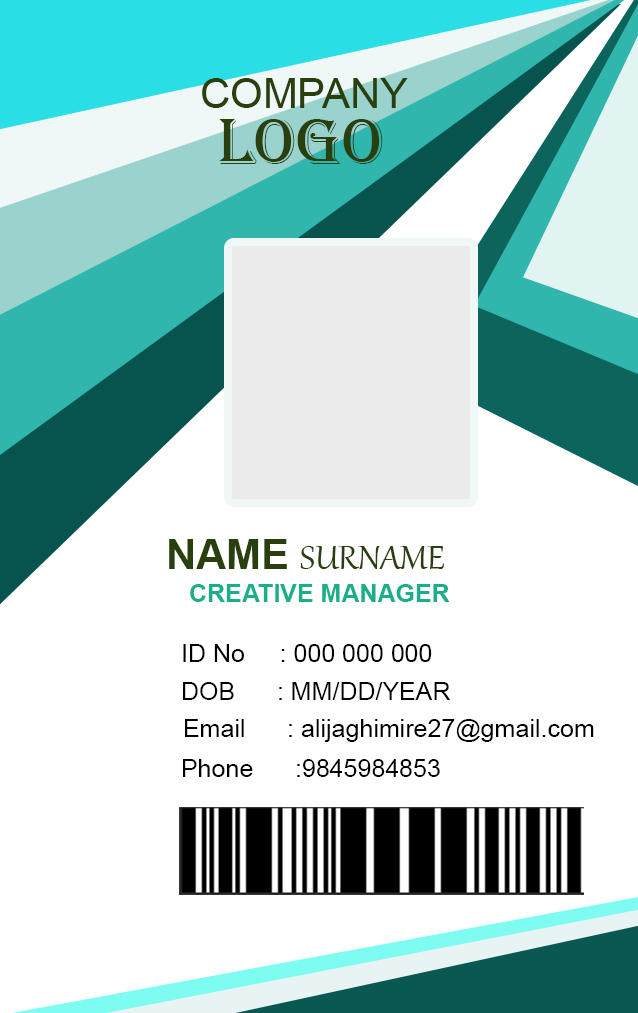
<style>
.page{position:relative;width:638px;height:1013px;background:#ffffff}
.page>*{position:absolute;margin:0}
.t1{font:41.7px "ArialMT";color:#29400e}
.t2{font:66.7px "Algerian";color:#29400e}
.t3{font:41.7px "Gabriola";color:#29400e}
.t4{font:41.7px "Arial-BoldMT";color:#29400e}
.t5{font:25px "Arial-BoldMT";color:#18af8a}
.t6{font:25px "ArialMT";color:#000000}
</style>
<div class="page">
<p class="t1" style="left:202px;top:78px;width:206px;height:30px">COMPANY</p>
<p class="t2" style="left:219px;top:119px;width:164px;height:45px">LOGO</p>
<p class="t3" style="left:169px;top:539px;width:275px;height:30px"><span class="t4">NAME </span>SURNAME</p>
<p class="t5" style="left:190px;top:584px;width:260px;height:18px">CREATIVE MANAGER</p>
<p class="t6" style="left:183px;top:644px;width:249px;height:18px">ID No     : 000 000 000</p>
<p class="t6" style="left:183px;top:682px;width:267px;height:18px">DOB      : MM/DD/YEAR</p>
<p class="t6" style="left:185px;top:719px;width:409px;height:23px">Email      : alijaghimire27@gmail.com</p>
<p class="t6" style="left:183px;top:759px;width:257px;height:18px">Phone      :9845984853</p>
</div>
